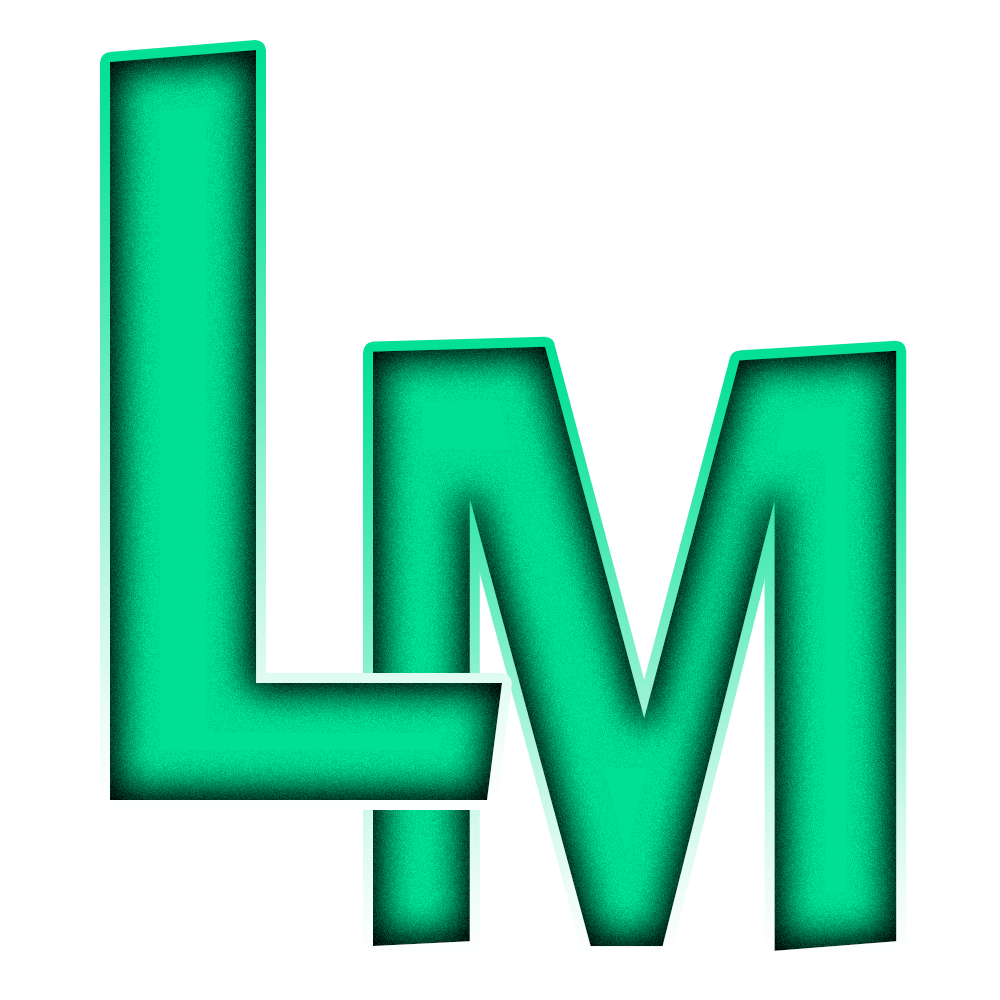
<style>
.page{position:relative;width:1000px;height:1000px;background:#ffffff}
.page>*{position:absolute;margin:0}
.t1{font:1000px "FrancoisOne-Regular"}
.t2{font:800px "FrancoisOne-Regular"}
</style>
<div class="page">
<p class="t1" style="left:110px;top:50px;width:392px;height:750px">L</p>
<p class="t2" style="left:373px;top:346px;width:524px;height:605px">M</p>
</div>
